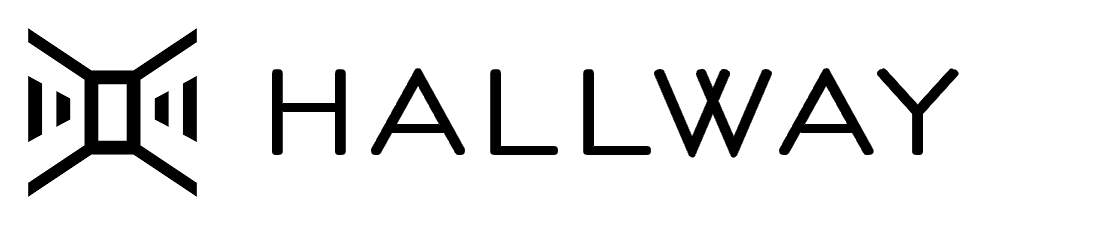
<style>
.page{position:relative;width:1103px;height:225px;background:#ffffff}
.page>*{position:absolute;margin:0}
.t1{font:114px "Existence-Light";letter-spacing:0.091em;color:#000000;scale:1.47 1}
</style>
<div class="page">
<p class="t1" style="left:274px;top:70px;width:683px;height:86px">HALLWAY</p>
</div>
